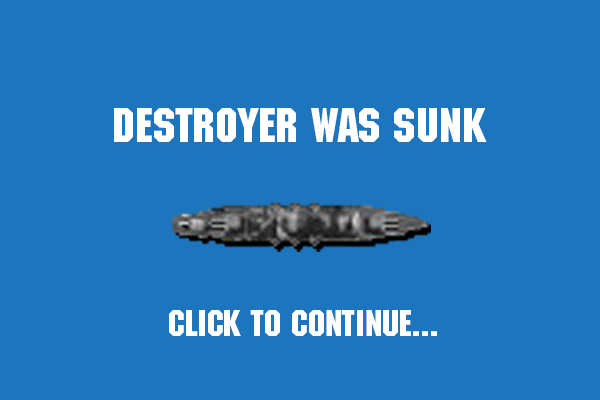
<style>
.page{position:relative;width:600px;height:400px;background:#1d75bd}
.page>*{position:absolute;margin:0}
.t1{font:48px "MachineStd";color:#ffffff}
.t2{font:36px "MachineStd";color:#ffffff}
</style>
<div class="page">
<p class="t1" style="left:114px;top:108px;width:373px;height:34px">DESTROYER was sunk</p>
<p class="t2" style="left:169px;top:310px;width:268px;height:26px">Click to continue...</p>
</div>
